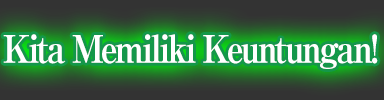
<style>
.page{position:relative;width:384px;height:100px}
.page>*{position:absolute;margin:0}
.t1{font:38px "RyuminPro-ExBold";letter-spacing:-0.08em;color:#ffffff;scale:0.9 1}
</style>
<div class="page">
<p class="t1" style="left:3px;top:34px;width:375px;height:35px">Kita Memiliki Keuntungan!</p>
<p class="t1" style="left:3px;top:34px;width:375px;height:35px">Kita Memiliki Keuntungan!</p>
</div>
